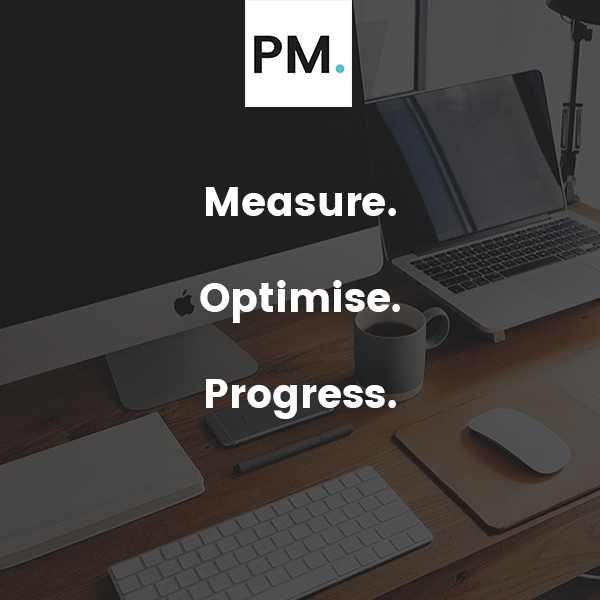
<style>
.page{position:relative;width:600px;height:600px}
.page>*{position:absolute;margin:0}
.t1{font:40px "Poppins";color:#ffffff}
</style>
<div class="page">
<p class="t1" style="left:200px;top:187px;width:200px;height:232px;text-align:center">Measure. <br><br>Optimise.<br><br>Progress.</p>
</div>
